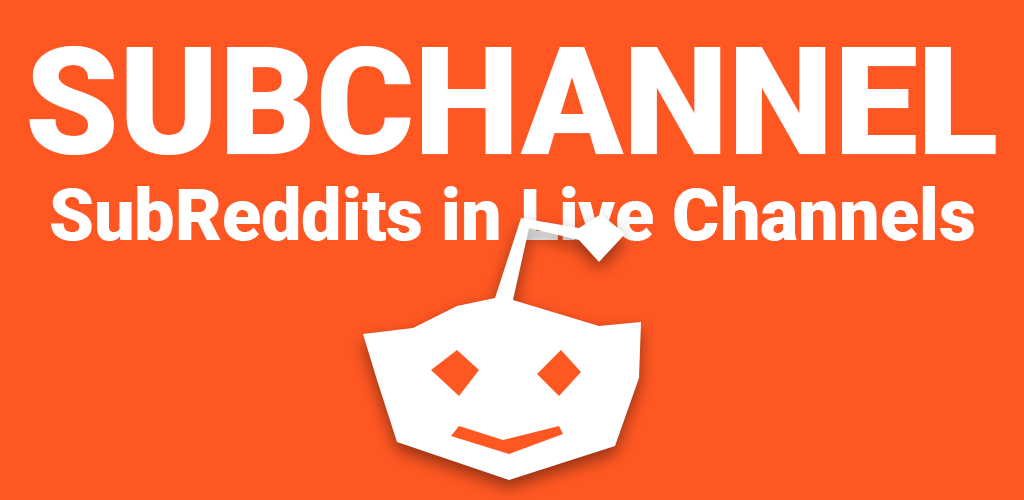
<style>
.page{position:relative;width:1024px;height:500px;background:#ff5722}
.page>*{position:absolute;margin:0}
.t1{font:72px "Roboto-Black";color:#ffffff}
.t2{font:150px "Roboto-Black";color:#ffffff}
</style>
<div class="page">
<p class="t1" style="left:29px;top:46px;width:967px;height:195px;text-align:center"><span class="t2">SUBCHANNEL<br></span>SubReddits in Live Channels</p>
</div>
